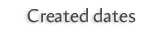
<style>
.page{position:relative;width:164px;height:32px;background:#ffffff}
.page>*{position:absolute;margin:0}
.t1{font:18.7px "Amira-Roman";color:#474747}
</style>
<div class="page">
<p class="t1" style="left:27px;top:8px;width:109px;height:15px">Created dates</p>
</div>
